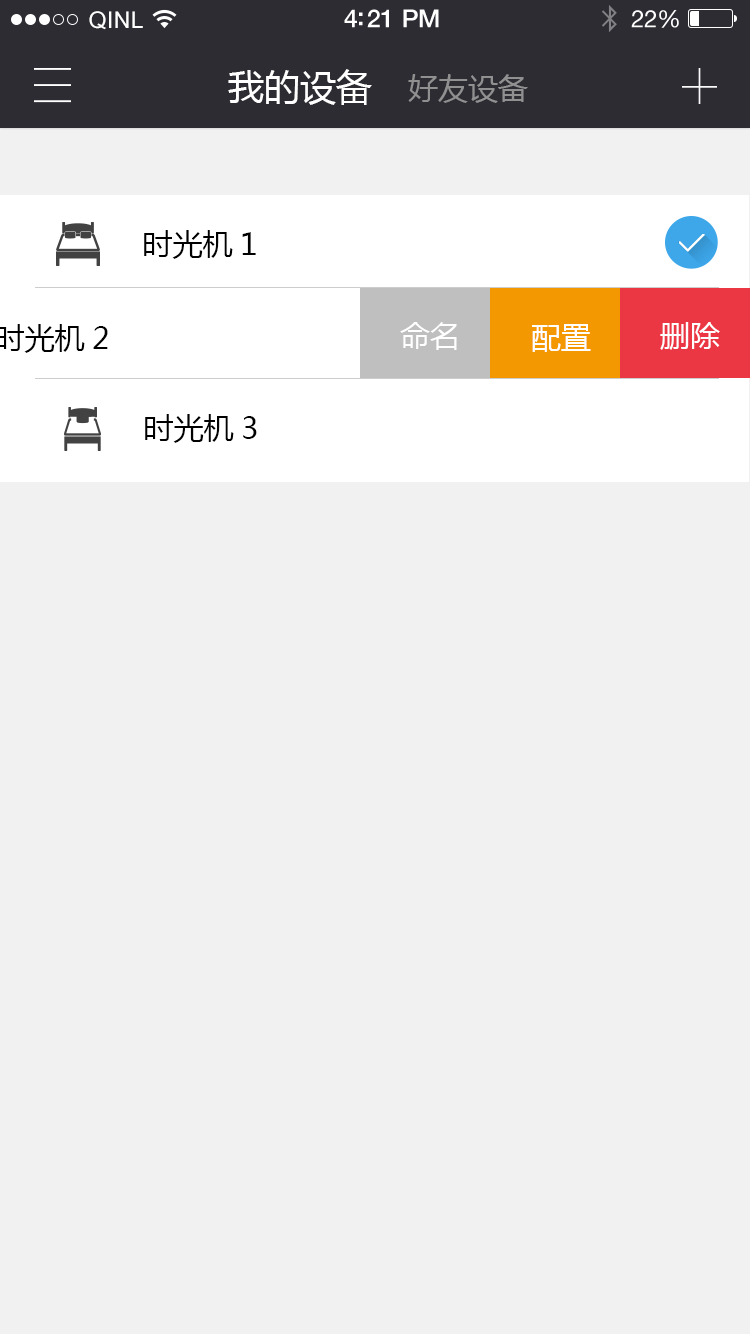
<style>
.page{position:relative;width:750px;height:1334px;background:#f1f1f1}
.page>*{position:absolute;margin:0}
.t1{font:23px "ArialUnicodeMS";letter-spacing:0.02em;color:#ffffff}
.t2{font:25px "HelveticaNeue-Medium";letter-spacing:-0.02em;color:#ffffff}
.t3{font:24px "HelveticaNeue";letter-spacing:-0.02em;color:#ffffff}
.t4{font:36px "MicrosoftYaHei";color:#ffffff}
.t5{font:30px "MicrosoftYaHei";color:#909091}
.t6{font:30px "MicrosoftYaHei";color:#000000}
.t7{font:30px "MicrosoftYaHei";color:#ffffff}
</style>
<div class="page">
<p class="t1" style="left:89px;top:11px;width:54px;height:19px">QINL</p>
<p class="t2" style="left:344px;top:9px;width:95px;height:19px">4:21 PM</p>
<p class="t3" style="left:631px;top:10px;width:48px;height:18px">22%</p>
<p class="t4" style="left:228px;top:69px;width:144px;height:36px">我的设备</p>
<p class="t5" style="left:408px;top:74px;width:120px;height:29px">好友设备</p>
<p class="t6" style="left:144px;top:230px;width:112px;height:29px">时光机1</p>
<p class="t7" style="left:400px;top:322px;width:57px;height:28px">命名</p>
<p class="t7" style="left:532px;top:324px;width:59px;height:28px">配置</p>
<p class="t7" style="left:660px;top:322px;width:60px;height:28px">删除</p>
<p class="t6" style="left:145px;top:414px;width:112px;height:29px">时光机3</p>
</div>
